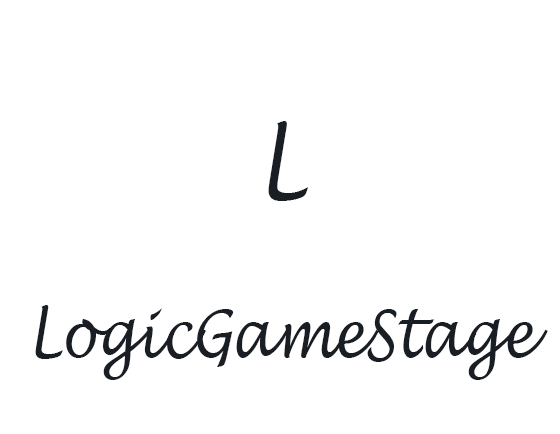
<style>
.page{position:relative;width:560px;height:434px;background:#ffffff}
.page>*{position:absolute;margin:0}
.t1{font:97.6px "LucidaHandwriting-Italic";color:#191e25;scale:0.82 1}
.t2{font:66.7px "LucidaHandwriting-Italic";color:#191e25;scale:0.82 1}
</style>
<div class="page">
<p class="t1" style="left:268px;top:121px;width:40px;height:80px">L</p>
<p class="t2" style="left:35px;top:305px;width:513px;height:75px">LogicGameStage</p>
</div>
